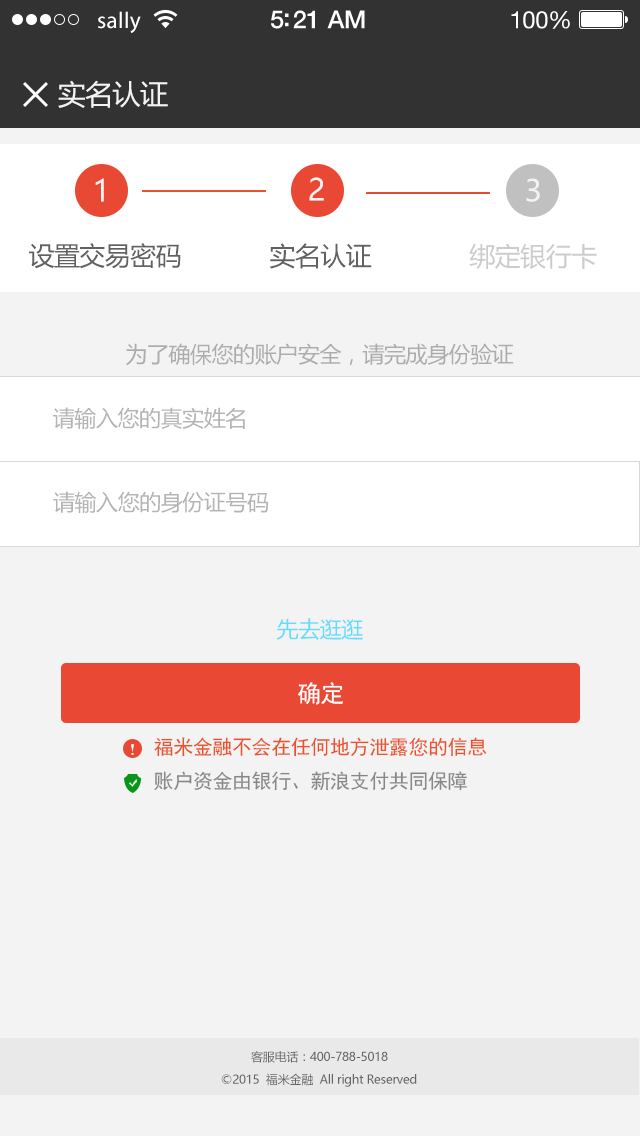
<style>
.page{position:relative;width:640px;height:1136px;background:#f3f3f3}
.page>*{position:absolute;margin:0}
.t1{font:23px "MyriadPro-Regular";letter-spacing:0.02em;color:#ffffff}
.t2{font:25px "HelveticaNeue-Medium";letter-spacing:-0.02em;color:#ffffff}
.t3{font:24px "HelveticaNeue";letter-spacing:-0.02em;color:#ffffff}
.t4{font:28px "MicrosoftYaHei";letter-spacing:-0.02em;color:#f3f3f3}
.t5{font:30px "MicrosoftYaHei";letter-spacing:-0.02em;color:#f3f3f3}
.t6{font:26px "MicrosoftYaHei";letter-spacing:-0.02em;color:#616161}
.t7{font:26px "MicrosoftYaHei";letter-spacing:-0.02em;color:#cccccc}
.t8{font:22px "MicrosoftYaHei";letter-spacing:-0.02em;color:#acacac}
.t9{font:22px "MicrosoftYaHei";letter-spacing:-0.02em;color:#b4b4b4}
.t10{font:22px "MicrosoftYaHei";letter-spacing:-0.02em;color:#63dcff}
.t11{font:24px "SimHei";letter-spacing:-0.02em;color:#ffffff}
.t12{font:20px "SimHei";letter-spacing:-0.02em;color:#ea522b}
.t13{font:20px "SimHei";letter-spacing:-0.02em;color:#878787}
.t14{font:12px "MicrosoftYaHei";letter-spacing:-0.02em;color:#646464}
</style>
<div class="page">
<p class="t1" style="left:98px;top:11px;width:43px;height:22px">sally</p>
<p class="t2" style="left:271px;top:10px;width:94px;height:19px">5:21 AM</p>
<p class="t3" style="left:511px;top:11px;width:59px;height:18px">100%</p>
<p class="t4" style="left:58px;top:80px;width:110px;height:28px">实名认证</p>
<p class="t5" style="left:95px;top:178px;width:9px;height:24px">1</p>
<p class="t5" style="left:309px;top:177px;width:15px;height:24px">2</p>
<p class="t5" style="left:526px;top:178px;width:14px;height:24px">3</p>
<p class="t6" style="left:29px;top:243px;width:152px;height:26px">设置交易密码</p>
<p class="t6" style="left:269px;top:243px;width:103px;height:26px">实名认证</p>
<p class="t7" style="left:469px;top:243px;width:128px;height:26px">绑定银行卡</p>
<p class="t8" style="left:126px;top:343px;width:388px;height:23px">为了确保您的账户安全，请完成身份验证</p>
<p class="t9" style="left:53px;top:407px;width:192px;height:22px">请输入您的真实姓名</p>
<p class="t9" style="left:53px;top:491px;width:215px;height:22px">请输入您的身份证号码</p>
<p class="t10" style="left:276px;top:618px;width:87px;height:22px">先去逛逛</p>
<p class="t11" style="left:297px;top:682px;width:47px;height:23px">确定</p>
<p class="t12" style="left:154px;top:737px;width:333px;height:20px">福米金融不会在任何地方泄露您的信息</p>
<p class="t13" style="left:154px;top:771px;width:313px;height:20px">账户资金由银行、新浪支付共同保障</p>
<p class="t14" style="left:251px;top:1051px;width:137px;height:12px">客服电话：400-788-5018</p>
<p class="t14" style="left:221px;top:1073px;width:196px;height:14px">©2015  福米金融  All right Reserved</p>
</div>
